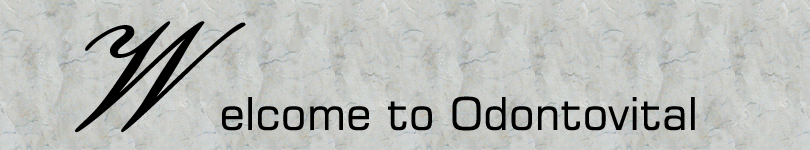
<style>
.page{position:relative;width:810px;height:150px}
.page>*{position:absolute;margin:0}
.t1{font:149.7px "EmbassyBT-Regular";color:#000000;scale:1.09 1}
.t2{font:45px "Square721BT-Roman";color:#000000}
</style>
<div class="page">
<p class="t1" style="left:75px;top:21px;width:171px;height:112px">W</p>
<p class="t2" style="left:222px;top:96px;width:473px;height:35px">elcome to Odontovital</p>
</div>
